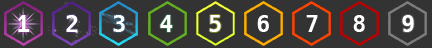
<style>
.page{position:relative;width:432px;height:48px;background:#333333}
.page>*{position:absolute;margin:0}
.t1{font:23.1px "Hack-Bold";color:#ffffff}
</style>
<div class="page">
<p class="t1" style="left:18px;top:15px;width:12px;height:17px">1</p>
<p class="t1" style="left:66px;top:15px;width:12px;height:17px">2</p>
<p class="t1" style="left:113px;top:15px;width:12px;height:17px">3</p>
<p class="t1" style="left:160px;top:15px;width:13px;height:17px">4</p>
<p class="t1" style="left:209px;top:15px;width:12px;height:17px">5</p>
<p class="t1" style="left:257px;top:15px;width:12px;height:17px">6</p>
<p class="t1" style="left:306px;top:15px;width:12px;height:17px">7</p>
<p class="t1" style="left:353px;top:15px;width:12px;height:17px">8</p>
<p class="t1" style="left:402px;top:15px;width:12px;height:17px">9</p>
</div>
